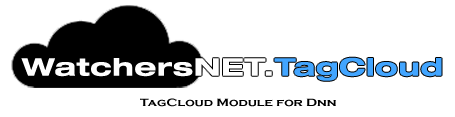
<style>
.page{position:relative;width:455px;height:117px;background:#ffffff}
.page>*{position:absolute;margin:0}
.t1{font:24px "Helvetica73-ExtendedBold";color:#fefefe;font-weight:bold;scale:1.2 1}
.t2{font:24px "Helvetica73-ExtendedBold";color:#42a5ff;font-weight:bold;scale:1.2 1}
.t3{font:11px "CopperplateGothic-Bold";color:#000000;scale:1.2 1}
</style>
<div class="page">
<p class="t1" style="left:21px;top:57px;width:421px;height:24px">WatchersNET.<span class="t2">TagCloud</span></p>
<p class="t3" style="left:140px;top:98px;width:196px;height:9px">TagCloud Module for Dnn</p>
</div>
